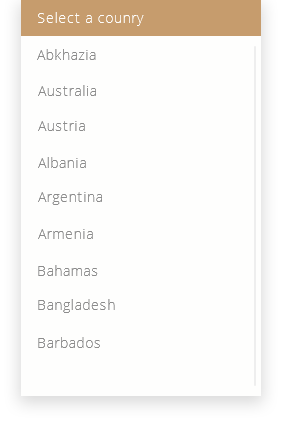
<style>
.page{position:relative;width:293px;height:434px;background:#fefefd}
.page>*{position:absolute;margin:0}
.t1{font:14px "OpenSans-Light";letter-spacing:0.05em;color:#fefefd}
.t2{font:14px "OpenSans-Light";letter-spacing:0.05em;color:#8c8c8c}
</style>
<div class="page">
<p class="t1" style="left:38px;top:12px;width:106px;height:14px">Select a counry</p>
<p class="t2" style="left:37px;top:49px;width:59px;height:11px">Abkhazia</p>
<p class="t2" style="left:38px;top:85px;width:58px;height:11px">Australia</p>
<p class="t2" style="left:38px;top:121px;width:47px;height:10px">Austria</p>
<p class="t2" style="left:38px;top:157px;width:48px;height:11px">Albania</p>
<p class="t2" style="left:38px;top:192px;width:64px;height:13px">Argentina</p>
<p class="t2" style="left:38px;top:229px;width:55px;height:10px">Armenia</p>
<p class="t2" style="left:38px;top:265px;width:60px;height:11px">Bahamas</p>
<p class="t2" style="left:38px;top:299px;width:77px;height:14px">Bangladesh</p>
<p class="t2" style="left:38px;top:337px;width:62px;height:11px">Barbados</p>
</div>
